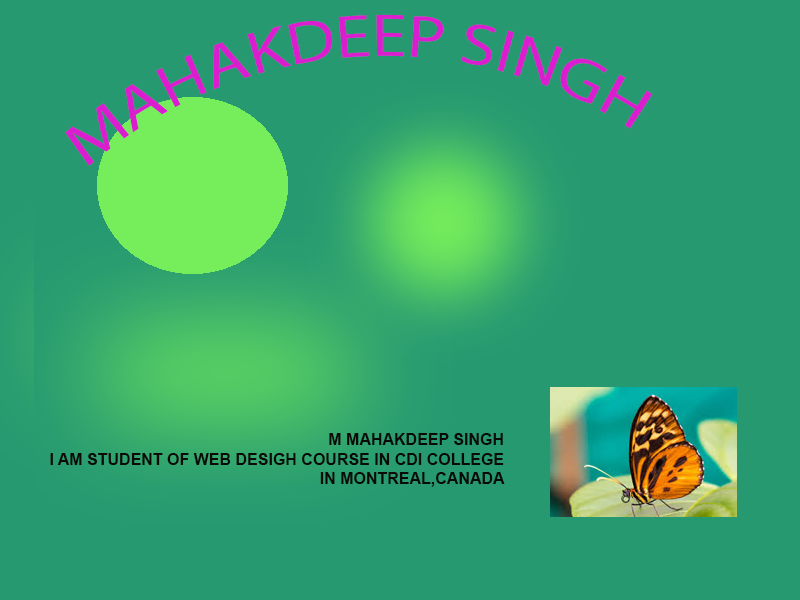
<style>
.page{position:relative;width:800px;height:600px;background:#269971}
.page>*{position:absolute;margin:0}
.t1{font:60px "MyriadPro-Regular";color:#db1dd0}
.t2{font:12px "MyriadPro-Regular";color:#269971}
.t3{font:16px "Arial-BoldMT";color:#0a0b09}
</style>
<div class="page">
<p class="t1" style="left:65px;top:14px;width:588px;height:160px"><span class="t2">,,</span>MAHAKDEEP SINGH</p>
<p class="t3" style="left:50px;top:433px;width:455px;height:54px;text-align:right">M MAHAKDEEP SINGH  <br>I AM STUDENT OF WEB DESIGH COURSE IN CDI COLLEGE IN MONTREAL,CANADA</p>
</div>
